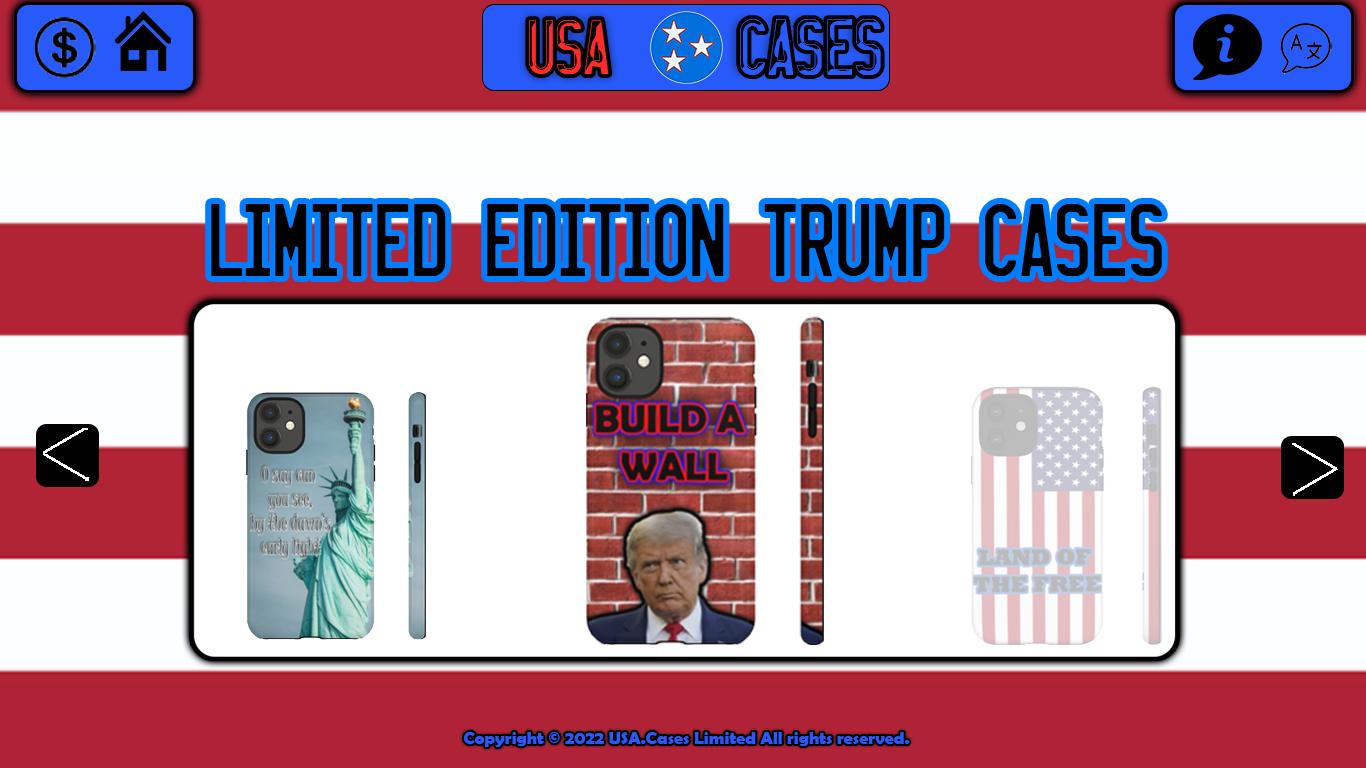
<style>
.page{position:relative;width:1366px;height:768px}
.page>*{position:absolute;margin:0}
.t1{font:53.9px "LICENSEPLATEUSA";color:#ff2a2a}
.t2{font:56.4px "LICENSEPLATEUSA";color:#285afa}
.t3{font:72px "LICENSEPLATEUSA";color:#000000}
.t4{font:18px "BerlinSansFBDemi-Bold";color:#285afa}
</style>
<div class="page">
<p class="t1" style="left:529px;top:20px;width:80px;height:54px">usa</p>
<p class="t2" style="left:740px;top:19px;width:141px;height:56px">cases</p>
<p class="t3" style="left:211px;top:204px;width:951px;height:72px">LIMITED EDITION TRUMP CASES</p>
<p class="t4" style="left:464px;top:732px;width:446px;height:15px">Copyright © 2022 USA.Cases Limited All rights reserved.</p>
</div>
